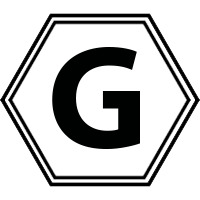
<style>
.page{position:relative;width:200px;height:200px;background:#ffffff}
.page>*{position:absolute;margin:0}
.t1{font:148px "MyriadPro-Bold";color:#000202}
</style>
<div class="page">
<p class="t1" style="left:52px;top:47px;width:88px;height:103px">G</p>
</div>
